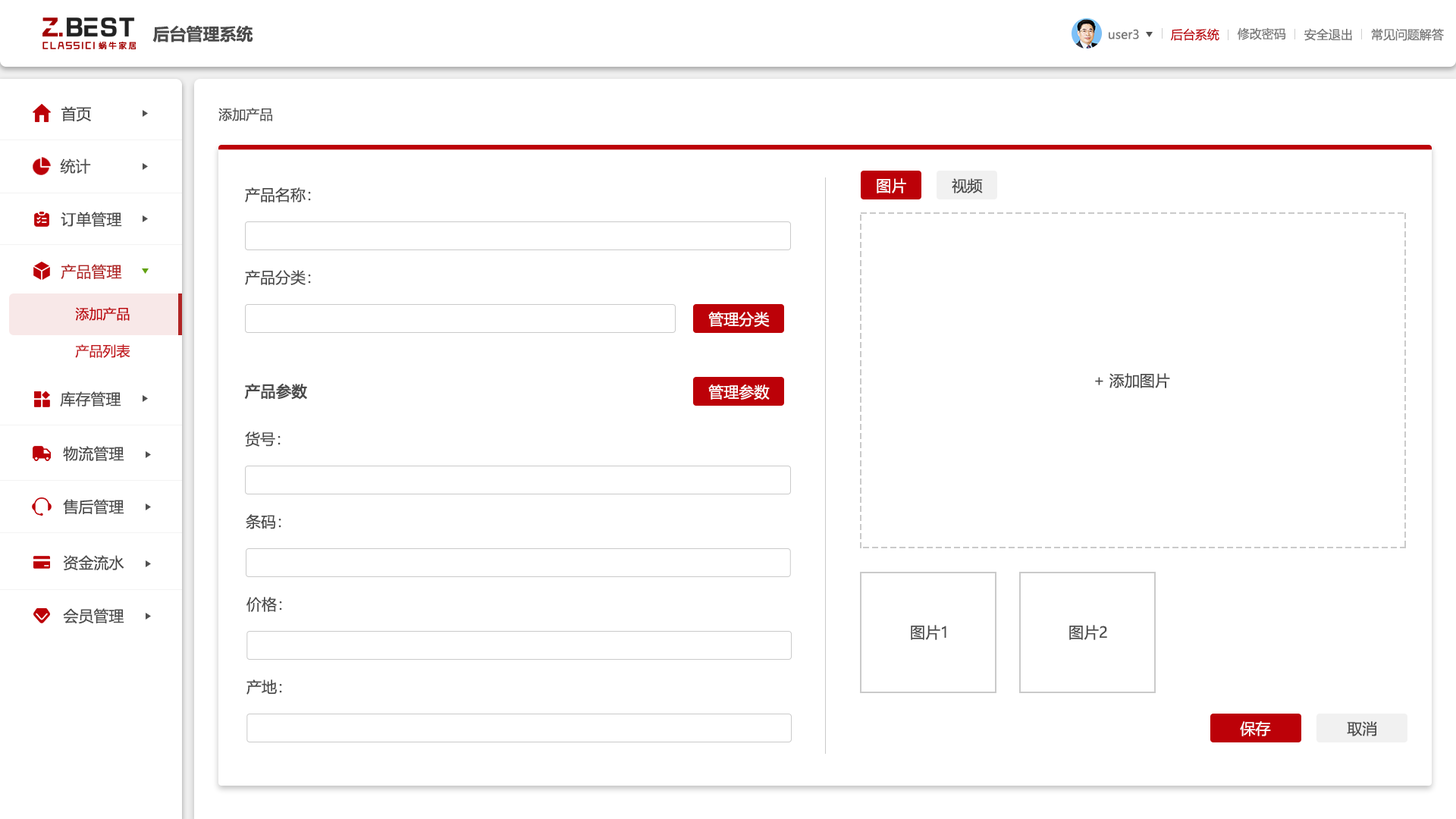
<style>
.page{position:relative;width:1456px;height:819px;background:#ffffff}
.page>*{position:absolute;margin:0}
.t1{font:16.7px "MicrosoftYaHei-Bold";color:#4b4b4b}
.t2{font:12.1px "MicrosoftYaHei";color:#777777}
.t3{font:12.1px "MicrosoftYaHei";color:#bc0108}
.t4{font:15.2px "MicrosoftYaHei";color:#4b4b4b}
.t5{font:13.6px "MicrosoftYaHei";color:#505050}
.t6{font:15.2px "MicrosoftYaHei";color:#505050}
.t7{font:15.2px "MicrosoftYaHei";color:#ffffff}
.t8{font:15.2px "MicrosoftYaHei";color:#b12424}
.t9{font:13.6px "MicrosoftYaHei";color:#bc0108}
.t10{font:13.6px "MicrosoftYaHei";color:#c2191f}
.t11{font:15.2px "MicrosoftYaHei";color:#4b4b4b;font-weight:bold}
</style>
<div class="page">
<p class="t1" style="left:152px;top:25px;width:101px;height:17px">后台管理系统</p>
<p class="t2" style="left:1109px;top:29px;width:30px;height:10px">user3</p>
<p class="t3" style="left:1170px;top:28px;width:49px;height:13px">后台系统</p>
<p class="t2" style="left:1238px;top:27px;width:48px;height:13px">修改密码</p>
<p class="t2" style="left:1304px;top:28px;width:48px;height:13px">安全退出</p>
<p class="t2" style="left:1371px;top:28px;width:73px;height:13px">常见问题解答</p>
<p class="t4" style="left:61px;top:106px;width:30px;height:16px">首页</p>
<p class="t5" style="left:218px;top:108px;width:54px;height:13px">添加产品</p>
<p class="t6" style="left:60px;top:158px;width:31px;height:16px">统计</p>
<p class="t7" style="left:877px;top:178px;width:29px;height:15px">图片</p>
<p class="t4" style="left:952px;top:178px;width:31px;height:15px">视频</p>
<p class="t4" style="left:245px;top:187px;width:66px;height:15px">产品名称：</p>
<p class="t4" style="left:61px;top:212px;width:61px;height:15px">订单管理</p>
<p class="t8" style="left:61px;top:264px;width:61px;height:15px">产品管理</p>
<p class="t4" style="left:245px;top:270px;width:66px;height:15px">产品分类：</p>
<p class="t9" style="left:75px;top:307px;width:55px;height:14px">添加产品</p>
<p class="t7" style="left:708px;top:312px;width:62px;height:15px">管理分类</p>
<p class="t10" style="left:75px;top:344px;width:55px;height:14px">产品列表</p>
<p class="t4" style="left:1095px;top:373px;width:75px;height:15px">+ 添加图片</p>
<p class="t11" style="left:244px;top:383px;width:63px;height:17px">产品参数</p>
<p class="t7" style="left:708px;top:384px;width:62px;height:16px">管理参数</p>
<p class="t4" style="left:60px;top:391px;width:61px;height:16px">库存管理</p>
<p class="t4" style="left:245px;top:431px;width:36px;height:16px">货号：</p>
<p class="t4" style="left:63px;top:446px;width:61px;height:15px">物流管理</p>
<p class="t4" style="left:63px;top:499px;width:61px;height:15px">售后管理</p>
<p class="t4" style="left:246px;top:514px;width:35px;height:15px">条码：</p>
<p class="t4" style="left:63px;top:555px;width:61px;height:16px">资金流水</p>
<p class="t4" style="left:246px;top:597px;width:36px;height:15px">价格：</p>
<p class="t4" style="left:63px;top:608px;width:61px;height:16px">会员管理</p>
<p class="t4" style="left:911px;top:625px;width:35px;height:15px">图片1</p>
<p class="t4" style="left:1069px;top:625px;width:38px;height:15px">图片2</p>
<p class="t4" style="left:246px;top:679px;width:36px;height:16px">产地：</p>
<p class="t7" style="left:1240px;top:721px;width:31px;height:15px">保存</p>
<p class="t4" style="left:1347px;top:721px;width:30px;height:15px">取消</p>
</div>
